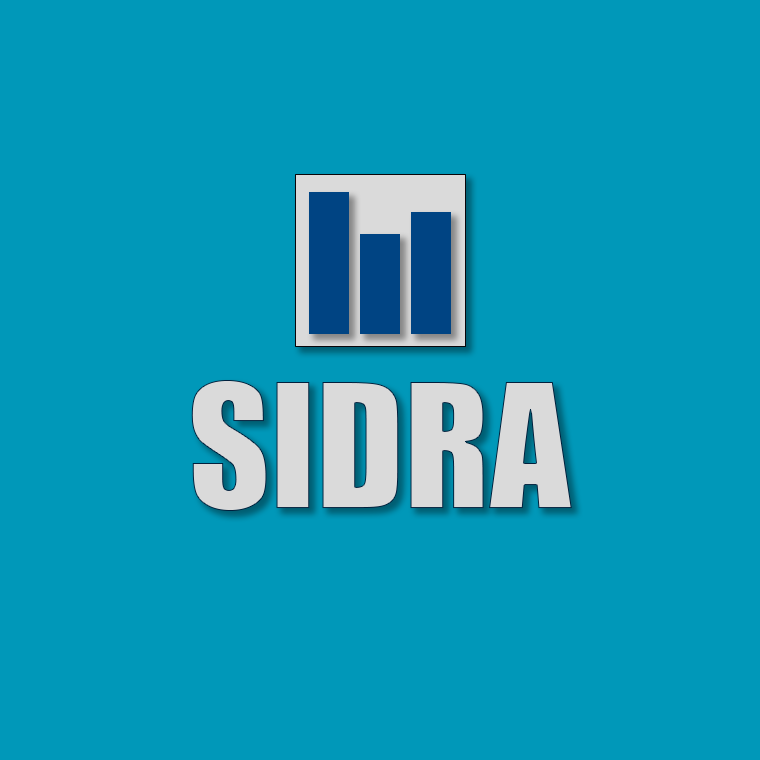
<style>
.page{position:relative;width:760px;height:760px;background:#0098b9}
.page>*{position:absolute;margin:0}
.t1{font:159.5px "Impact";color:#dadada}
</style>
<div class="page">
<p class="t1" style="left:191px;top:380px;width:381px;height:131px">SIDRA</p>
</div>
